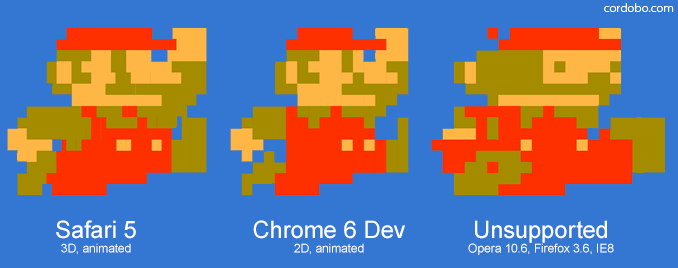
<style>
.page{position:relative;width:678px;height:268px;background:#3377d3}
.page>*{position:absolute;margin:0}
.t1{font:10.8px "KozGoPro-Light";color:#ffffff;scale:1.11 1}
.t2{font:12px "ArialMT";color:#ffffff}
.t3{font:24px "ArialMT";color:#ffffff}
</style>
<div class="page">
<p class="t1" style="left:604px;top:3px;width:70px;height:9px">cordobo.com</p>
<p class="t2" style="left:56px;top:220px;width:80px;height:35px;text-align:center"><span class="t3">Safari 5<br></span>3D, animated</p>
<p class="t3" style="left:253px;top:220px;width:152px;height:35px;text-align:center">Chrome 6 Dev<br><span class="t2">2D, animated</span></p>
<p class="t2" style="left:468px;top:220px;width:146px;height:35px;text-align:center"><span class="t3">Unsupported<br></span>Opera 10.6, Firefox 3.6, IE8</p>
</div>
